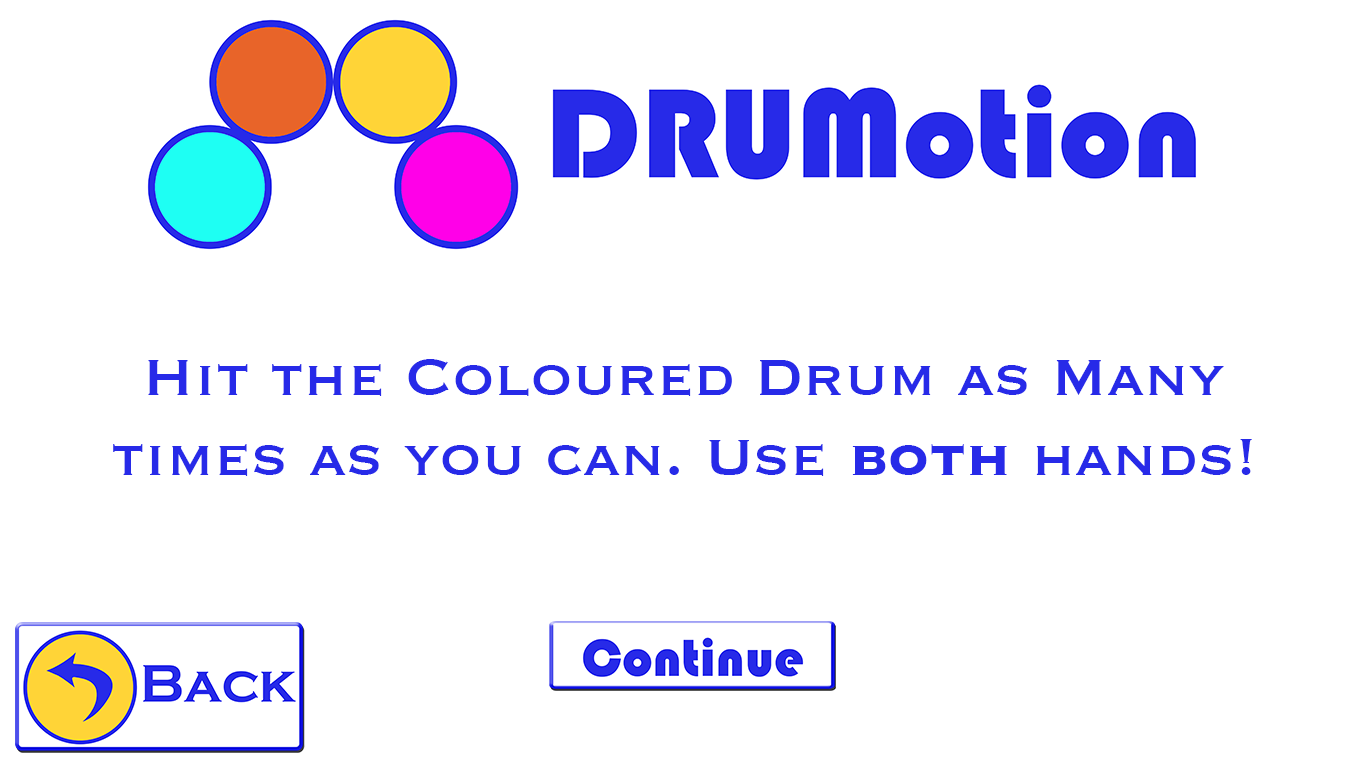
<style>
.page{position:relative;width:1366px;height:768px;background:#ffffff}
.page>*{position:absolute;margin:0}
.t1{font:66.7px "Copperplate";color:#272ae8}
.t2{font:66.7px "Copperplate-Bold";color:#272ae8}
</style>
<div class="page">
<p class="t1" style="left:113px;top:359px;width:1139px;height:117px;text-align:center">Hit the Coloured Drum as Many times as you can. Use <span class="t2">both</span> hands!</p>
</div>
